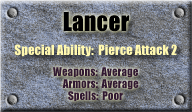
<style>
.page{position:relative;width:192px;height:112px}
.page>*{position:absolute;margin:0}
.t1{font:24px "Impact";color:#000000}
.t2{font:13px "Impact";color:#fff8b0}
.t3{font:11px "Impact";color:#311931}
</style>
<div class="page">
<p class="t1" style="left:63px;top:12px;width:66px;height:20px">Lancer</p>
<p class="t2" style="left:14px;top:44px;width:163px;height:13px">Special Ability:  Pierce Attack 2</p>
<p class="t3" style="left:53px;top:67px;width:85px;height:11px">Weapons:  Average</p>
<p class="t3" style="left:62px;top:79px;width:77px;height:11px">Armors:  Average</p>
<p class="t3" style="left:68px;top:91px;width:55px;height:10px">Spells:  Poor</p>
</div>
